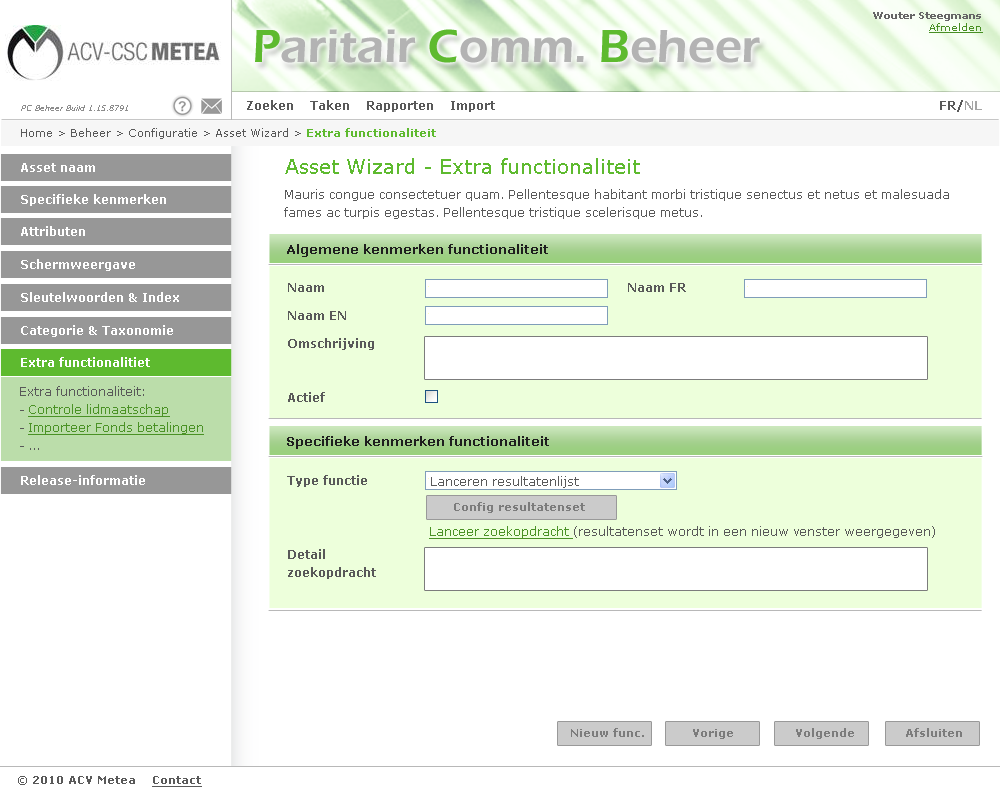
<style>
.page{position:relative;width:1000px;height:800px;background:#ffffff}
.page>*{position:absolute;margin:0}
.t1{font:10px "Verdana-Bold";color:#666666}
.t2{font:10px "Verdana";color:#488f24;text-decoration:underline}
.t3{font:48px "ErasITC-Demi";color:#b3b3b3}
.t4{font:48px "ErasITC-Demi";color:#5eba2f}
.t5{font:12px "Verdana-Bold";color:#595959}
.t6{font:12px "Verdana-Bold";color:#a4a4a4}
.t7{font:8px "Verdana-Italic";color:#8c8c8c}
.t8{font:11px "Verdana";color:#595959}
.t9{font:11px "Verdana-Bold";color:#5eba2f}
.t10{font:20px "Verdana";color:#5eba2f}
.t11{font:12px "Verdana-Bold";color:#ffffff}
.t12{font:12px/18px "Verdana";color:#595959}
.t13{font:13px "Verdana-Bold";color:#1e1e1e}
.t14{font:12px/18px "Verdana-Bold";color:#595959}
.t15{font:12px/18px "Verdana";color:#4a9225;text-decoration:underline}
.t16{font:12px "Verdana";color:#595959}
.t17{font:11px "Verdana-Bold";color:#7c7c7c}
.t18{font:12px "Verdana";color:#4a9225;text-decoration:underline}
.t19{font:11px "Verdana-Bold";color:#595959}
.t20{font:11px "Verdana-Bold";color:#595959;text-decoration:underline}
</style>
<div class="page">
<p class="t1" style="left:873px;top:12px;width:110px;height:21px;text-align:right">Wouter Steegmans<br><span class="t2">Afmelden</span></p>
<p class="t3" style="left:255px;top:29px;width:505px;height:34px"><span class="t4">P</span>aritair <span class="t4">C</span>omm. <span class="t4">B</span>eheer</p>
<p class="t5" style="left:247px;top:100px;width:248px;height:12px">Zoeken    Taken    Rapporten    Import</p>
<p class="t5" style="left:940px;top:100px;width:42px;height:12px">FR/<span class="t6">NL</span></p>
<p class="t7" style="left:21px;top:105px;width:107px;height:6px">PC Beheer Build 1.15.8791</p>
<p class="t8" style="left:21px;top:128px;width:415px;height:11px">Home &gt; Beheer &gt; Configuratie &gt; Asset Wizard &gt; <span class="t9">Extra functionaliteit</span></p>
<p class="t10" style="left:285px;top:158px;width:355px;height:16px">Asset Wizard - Extra functionaliteit</p>
<p class="t11" style="left:21px;top:163px;width:74px;height:9px">Asset naam</p>
<p class="t11" style="left:21px;top:194px;width:145px;height:12px">Specifieke kenmerken</p>
<p class="t12" style="left:284px;top:189px;width:665px;height:30px">Mauris congue consectetuer quam. Pellentesque habitant morbi tristique senectus et netus et malesuada <br>fames ac turpis egestas. Pellentesque tristique scelerisque metus.</p>
<p class="t11" style="left:21px;top:226px;width:64px;height:10px">Attributen</p>
<p class="t13" style="left:287px;top:244px;width:261px;height:13px">Algemene kenmerken functionaliteit</p>
<p class="t11" style="left:21px;top:259px;width:114px;height:12px">Schermweergave</p>
<p class="t11" style="left:21px;top:292px;width:158px;height:10px">Sleutelwoorden &amp; Index</p>
<p class="t14" style="left:288px;top:283px;width:86px;height:119px">Naam<br><br>Naam EN<br><br>Omschrijving<br><br><br>Actief</p>
<p class="t5" style="left:628px;top:283px;width:58px;height:9px">Naam FR</p>
<p class="t11" style="left:21px;top:325px;width:152px;height:12px">Categorie &amp; Taxonomie</p>
<p class="t11" style="left:21px;top:357px;width:129px;height:10px">Extra functionalitiet</p>
<p class="t15" style="left:20px;top:386px;width:184px;height:64px"><span class="t12">Extra functionaliteit:<br>- </span>Controle lidmaatschap<br><span class="t12">- </span>Importeer Fonds betalingen<br><span class="t12">- ...</span></p>
<p class="t13" style="left:287px;top:436px;width:262px;height:13px">Specifieke kenmerken functionaliteit</p>
<p class="t11" style="left:21px;top:475px;width:124px;height:10px">Release-informatie</p>
<p class="t14" style="left:287px;top:475px;width:89px;height:104px">Type functie<br><br><br><br><br>Detail <br>zoekopdracht</p>
<p class="t16" style="left:431px;top:476px;width:148px;height:12px">Lanceren resultatenlijst</p>
<p class="t17" style="left:454px;top:502px;width:131px;height:11px">Config resultatenset</p>
<p class="t16" style="left:429px;top:526px;width:506px;height:13px"><span class="t18">Lanceer zoekopdracht </span>(resultatenset wordt in een nieuw venster weergegeven)</p>
<p class="t17" style="left:571px;top:728px;width:73px;height:9px">Nieuw func.</p>
<p class="t17" style="left:693px;top:729px;width:40px;height:10px">Vorige</p>
<p class="t17" style="left:796px;top:728px;width:58px;height:11px">Volgende</p>
<p class="t17" style="left:906px;top:728px;width:56px;height:9px">Afsluiten</p>
<p class="t19" style="left:18px;top:776px;width:184px;height:11px"><span class="t8">©</span> 2010 ACV Metea    <span class="t20">Contact</span></p>
</div>
